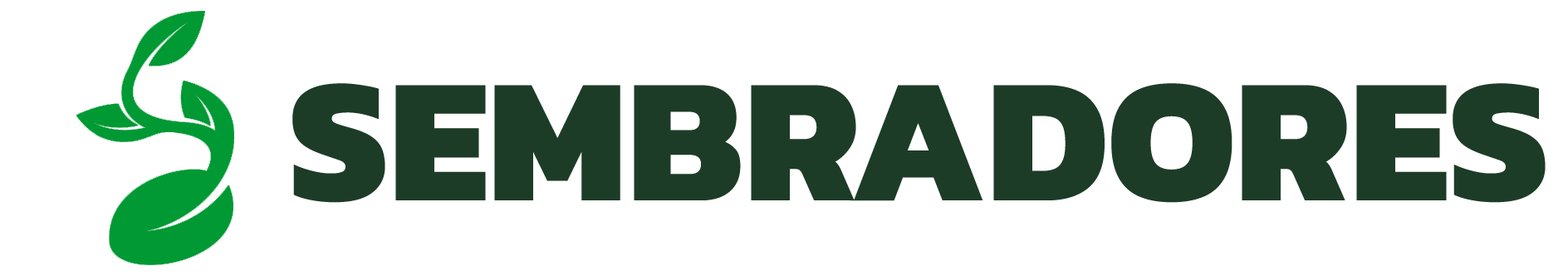
<style>
.page{position:relative;width:1568px;height:276px;background:#ffffff}
.page>*{position:absolute;margin:0}
.t1{font:178.3px "Kanit-ExtraBold";color:#1d3c27}
</style>
<div class="page">
<p class="t1" style="left:292px;top:83px;width:1254px;height:120px">SEMBRADORES</p>
</div>
